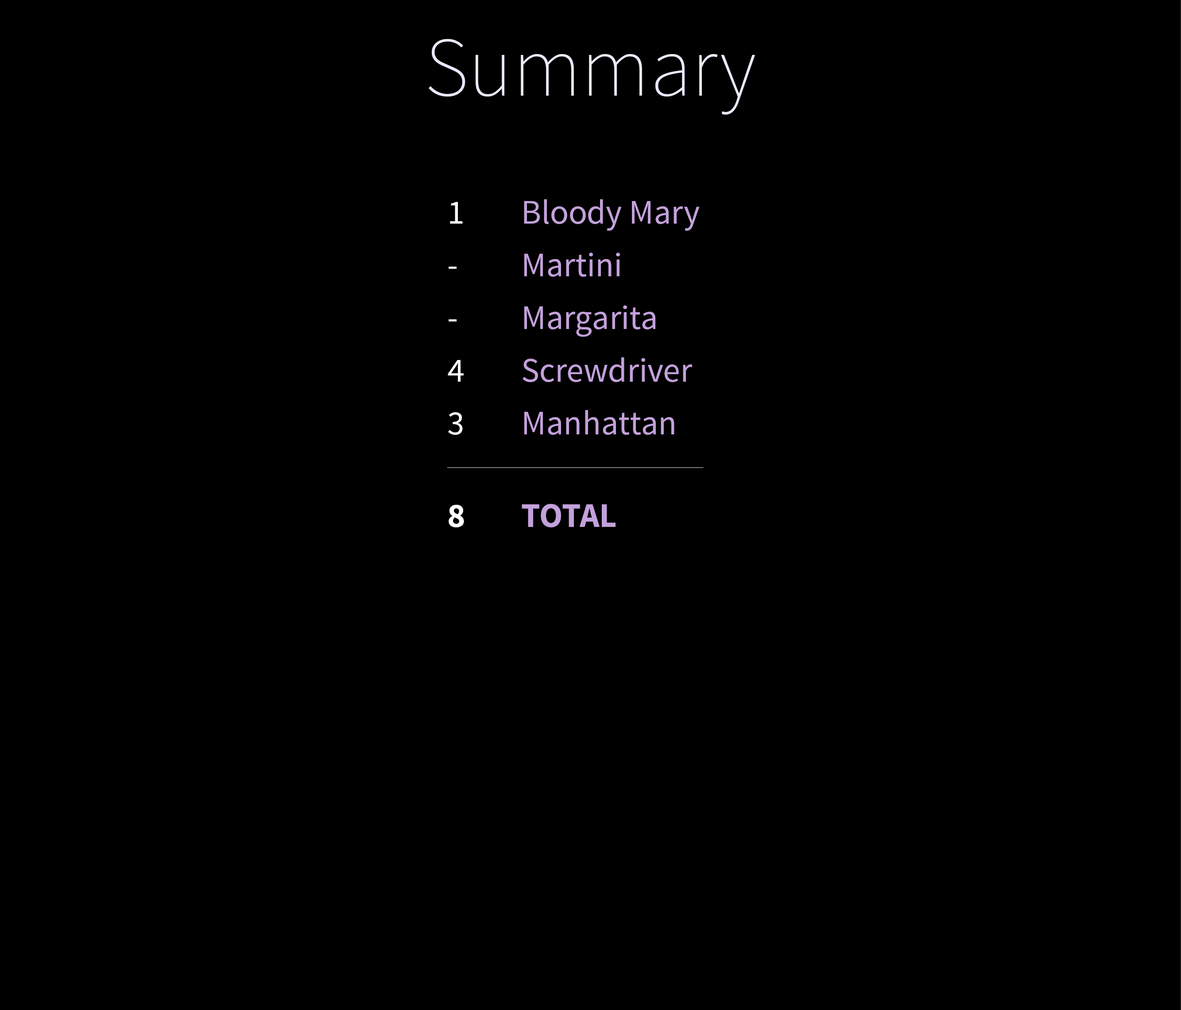
<style>
.page{position:relative;width:1181px;height:1010px;background:#000000}
.page>*{position:absolute;margin:0}
.t1{font:84.9px "SourceSansPro-ExtraLight";color:#ece8fc}
.t2{font:34.2px/52.7px "SourceSansPro-Regular";color:#ffffff}
.t3{font:34.2px/52.7px "SourceSansPro-Bold";color:#ffffff}
.t4{font:34.2px/52.7px "SourceSansPro-Regular";color:#c3a1db}
.t5{font:34.2px/52.7px "SourceSansPro-Bold";color:#c3a1db}
</style>
<div class="page">
<p class="t1" style="left:429px;top:39px;width:326px;height:76px">Summary</p>
<p class="t2" style="left:448px;top:202px;width:16px;height:325px">1<br>- <br>-<br>4<br>3<br><br><span class="t3">8</span></p>
<p class="t4" style="left:522px;top:199px;width:178px;height:328px">Bloody Mary<br>Martini<br>Margarita<br>Screwdriver<br>Manhattan<br><br><span class="t5">TOTAL</span></p>
</div>
